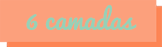
<style>
.page{position:relative;width:162px;height:47px;background:#fca07c}
.page>*{position:absolute;margin:0}
.t1{font:26.7px "Pacifico-Regular";color:#96d1b7}
</style>
<div class="page">
<p class="t1" style="left:26px;top:5px;width:111px;height:25px">6 camadas</p>
</div>
